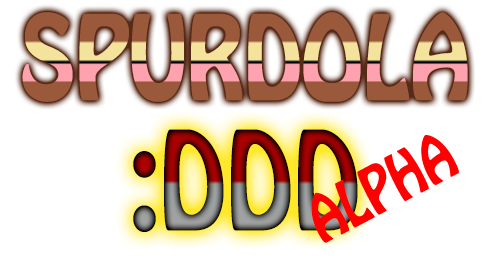
<style>
.page{position:relative;width:490px;height:261px;background:#ffffff}
.page>*{position:absolute;margin:0}
.t1{font:104.1px "HoboStd";scale:0.83 1}
.t2{font:121px "HoboStd";scale:0.83 1}
.t3{font:58.1px "HoboStd";color:#ff0000;scale:0.83 1}
</style>
<div class="page">
<p class="t1" style="left:22px;top:12px;width:446px;height:90px">SPURDOLA</p>
<p class="t2" style="left:133px;top:129px;width:225px;height:103px">:DDD</p>
<p class="t3" style="left:311px;top:135px;width:148px;height:108px;rotate:-28deg">ALPHA</p>
</div>
